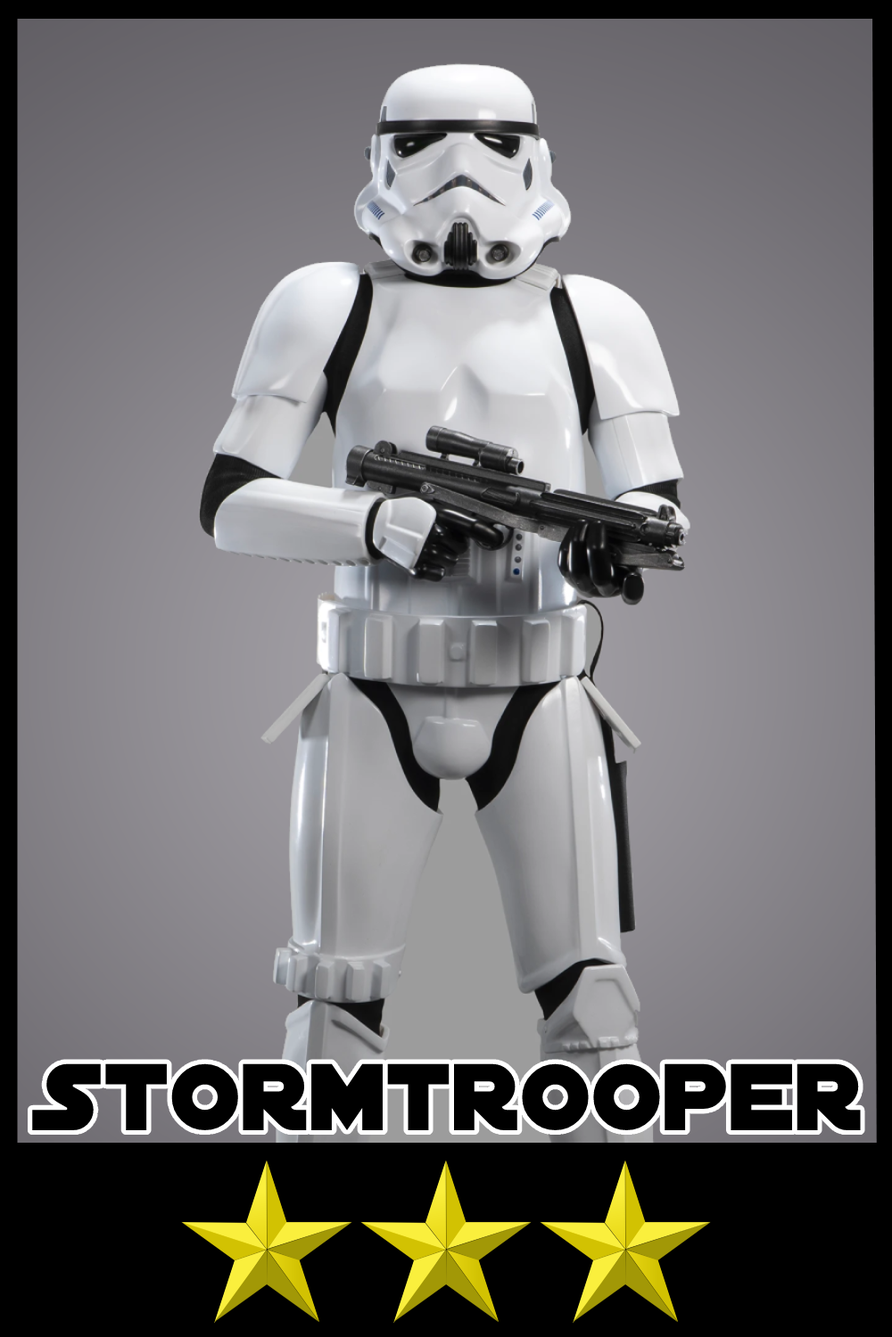
<style>
.page{position:relative;width:892px;height:1337px}
.page>*{position:absolute;margin:0}
.t1{font:101.8px "DistantGalaxy";color:#000000}
</style>
<div class="page">
<p class="t1" style="left:32px;top:1064px;width:828px;height:67px">Stormtrooper</p>
</div>
